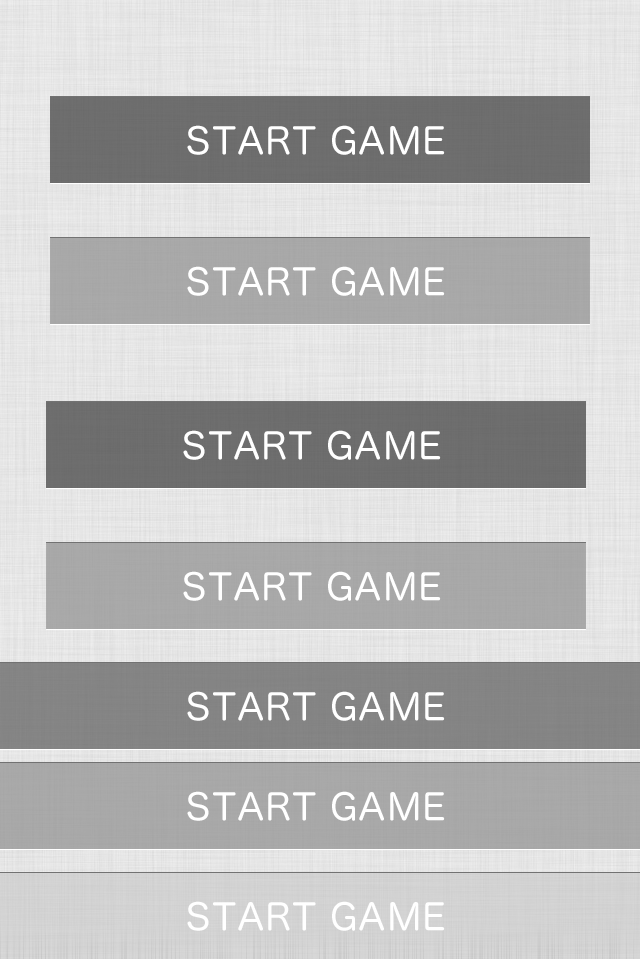
<style>
.page{position:relative;width:640px;height:960px}
.page>*{position:absolute;margin:0}
.t1{font:36px "HiraMaruPro-W4";letter-spacing:0.025em;color:#ffffff}
</style>
<div class="page">
<p class="t1" style="left:187px;top:125px;width:258px;height:30px">START GAME</p>
<p class="t1" style="left:187px;top:266px;width:258px;height:30px">START GAME</p>
<p class="t1" style="left:183px;top:430px;width:258px;height:30px">START GAME</p>
<p class="t1" style="left:183px;top:571px;width:258px;height:30px">START GAME</p>
<p class="t1" style="left:187px;top:691px;width:258px;height:30px">START GAME</p>
<p class="t1" style="left:187px;top:791px;width:258px;height:30px">START GAME</p>
</div>
